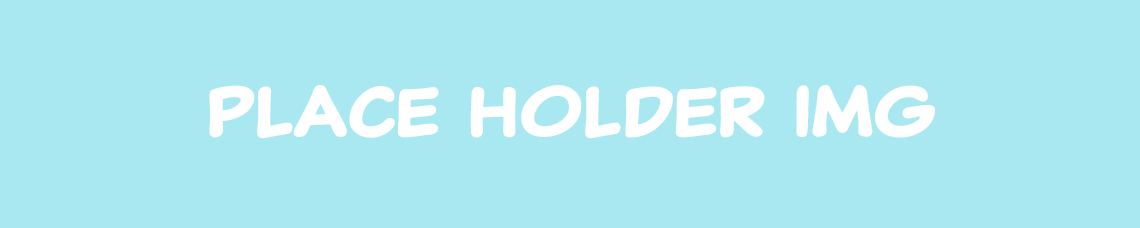
<style>
.page{position:relative;width:1140px;height:228px;background:#a9e8f1}
.page>*{position:absolute;margin:0}
.t1{font:72px "ClassicComic-Bold";color:#ffffff}
</style>
<div class="page">
<p class="t1" style="left:209px;top:85px;width:726px;height:54px">place holder img</p>
</div>
